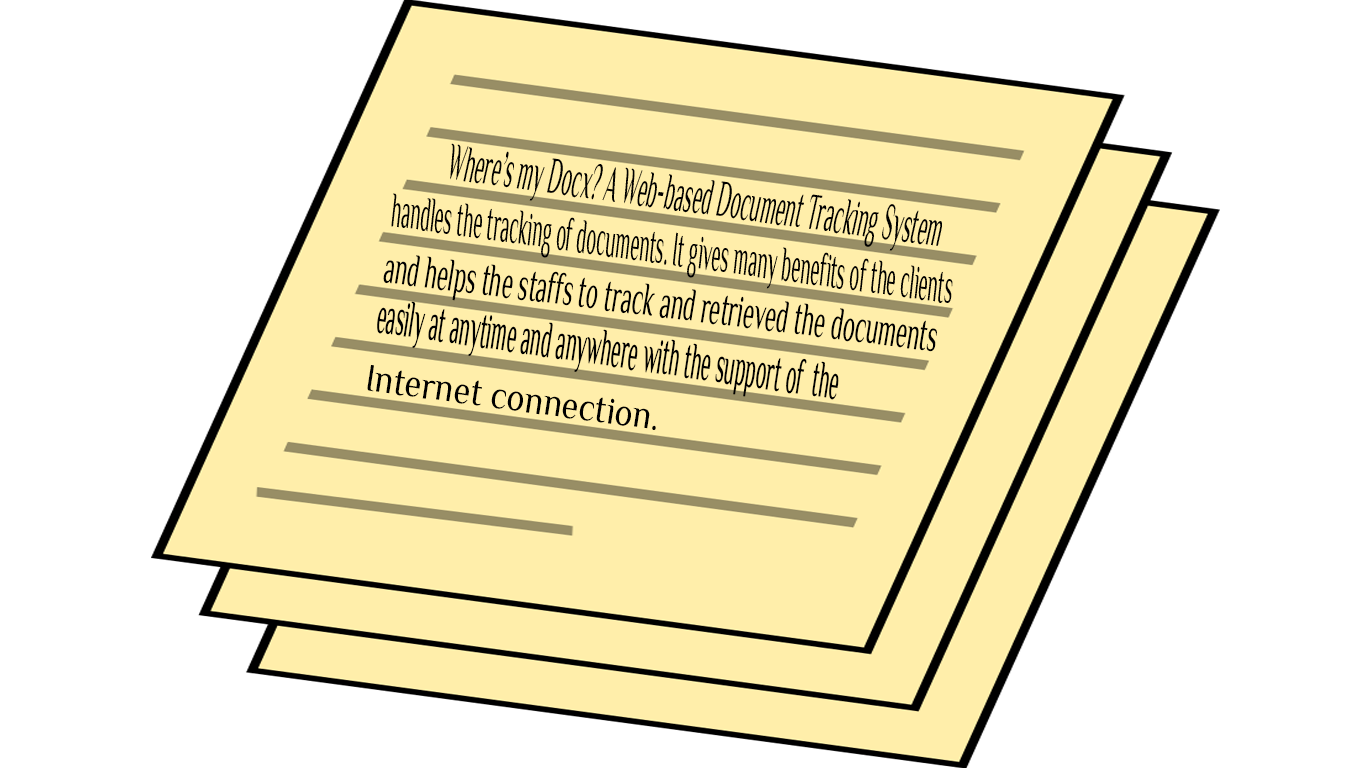
<style>
.page{position:relative;width:1366px;height:768px;background:#ffffff}
.page>*{position:absolute;margin:0}
.t1{font:52.2px "Philosopher";color:#000000;scale:0.37 1}
.t2{font:49.5px "Philosopher";color:#000000;scale:0.38 1}
.t3{font:46.7px "Philosopher";color:#000000;scale:0.49 1}
.t4{font:52.3px "Philosopher";color:#000000;scale:0.38 1}
.t5{font:39.2px "Philosopher";color:#000000;scale:0.88 1}
</style>
<div class="page">
<p class="t1" style="left:450px;top:143px;width:492px;height:108px;rotate:8deg">Where’s my Docx? A Web-based Document Tracking System</p>
<p class="t2" style="left:391px;top:193px;width:562px;height:110px;rotate:8deg">handles the tracking of documents. It gives many benefits of the clients</p>
<p class="t3" style="left:383px;top:255px;width:554px;height:97px;rotate:7deg">and helps the staffs to track and retrieved the documents</p>
<p class="t4" style="left:377px;top:301px;width:462px;height:99px;rotate:8deg">easily at anytime and anywhere with the support of  the</p>
<p class="t5" style="left:367px;top:365px;width:289px;height:65px;rotate:8deg">Internet connection.</p>
</div>
